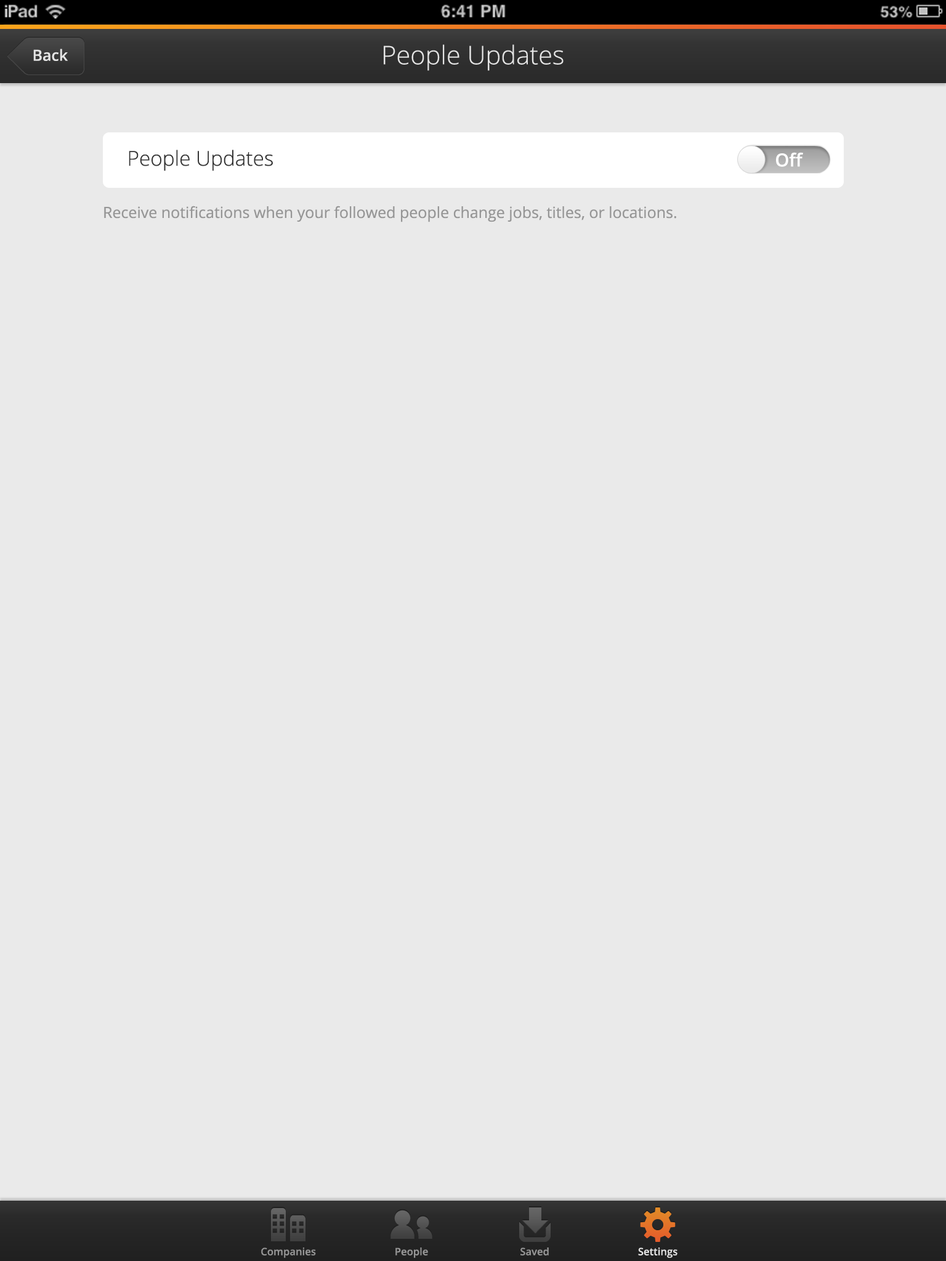
<style>
.page{position:relative;width:946px;height:1261px;background:#eaeaea}
.page>*{position:absolute;margin:0}
.t1{font:15.4px "OpenSans-Semibold";color:#e5e5e5}
.t2{font:25.7px "OpenSans-Light";color:#e5e5e5}
.t3{font:20.5px "OpenSans-Light";color:#343434}
.t4{font:18px "OpenSans-Semibold";color:#ffffff}
.t5{font:15.4px "OpenSans";color:#969696}
.t6{font:10.3px "OpenSans-Semibold";color:#969696}
.t7{font:10.3px "OpenSans-Semibold";color:#e5e5e5}
</style>
<div class="page">
<p class="t1" style="left:33px;top:49px;width:35px;height:12px">Back</p>
<p class="t2" style="left:384px;top:44px;width:179px;height:27px">People Updates</p>
<p class="t3" style="left:129px;top:150px;width:144px;height:21px">People Updates</p>
<p class="t4" style="left:776px;top:152px;width:27px;height:15px">Off</p>
<p class="t5" style="left:104px;top:206px;width:572px;height:16px">Receive notifications when your followed people change jobs, titles, or locations.</p>
<p class="t6" style="left:261px;top:1247px;width:55px;height:11px">Companies</p>
<p class="t6" style="left:395px;top:1247px;width:33px;height:11px">People</p>
<p class="t6" style="left:520px;top:1247px;width:29px;height:8px">Saved</p>
<p class="t7" style="left:638px;top:1247px;width:39px;height:11px">Settings</p>
</div>
